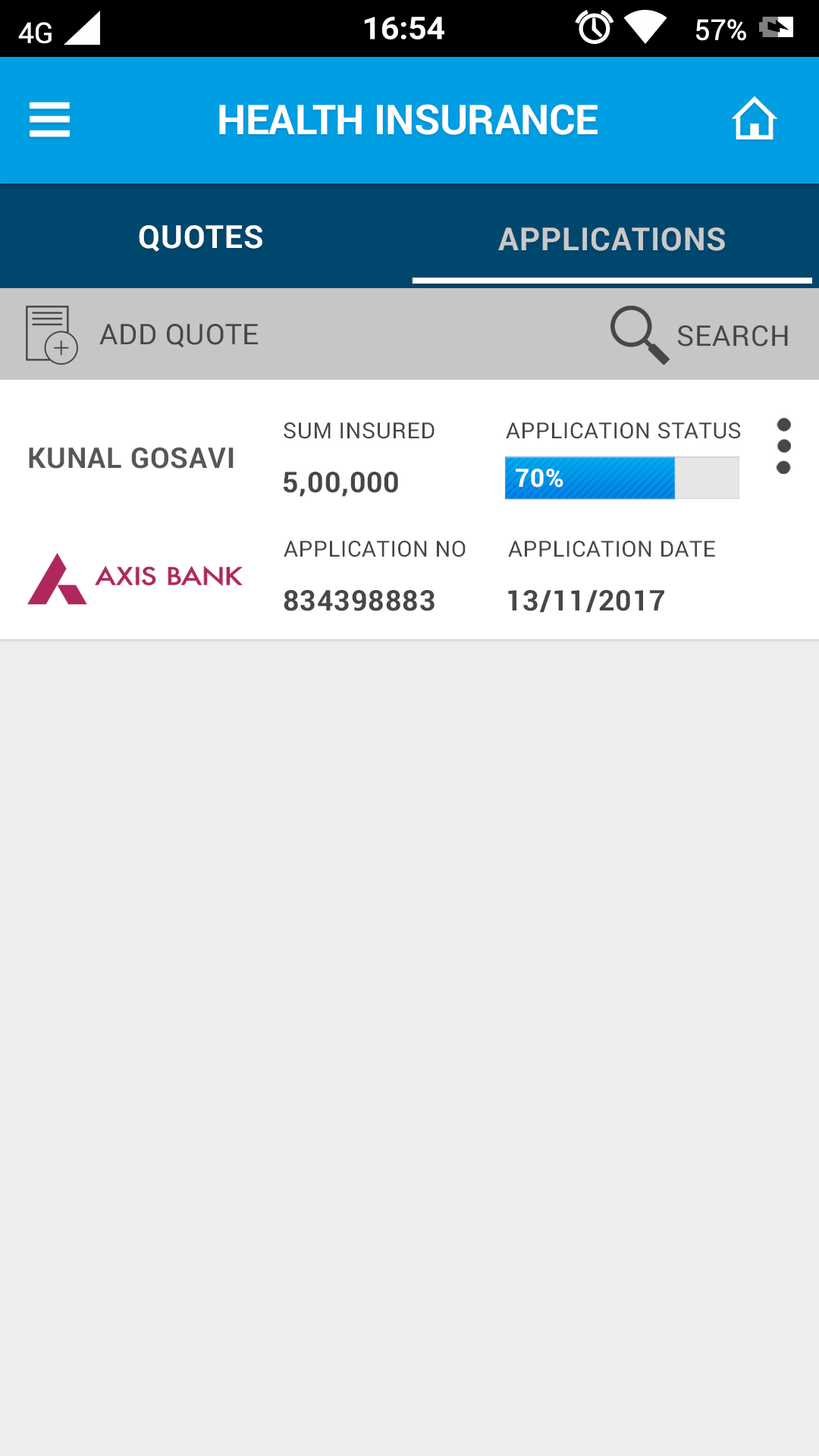
<style>
.page{position:relative;width:819px;height:1456px;background:#eeeeee}
.page>*{position:absolute;margin:0}
.t1{font:41.1px "Roboto-Bold";letter-spacing:-0.01em;color:#ffffff}
.t2{font:31.6px "Roboto-Bold";letter-spacing:0.025em;color:#ffffff}
.t3{font:31.6px "Roboto-Bold";letter-spacing:0.025em;color:#c9c9c9}
.t4{font:28.4px "Roboto-Regular";letter-spacing:0.025em;color:#474747}
.t5{font:22.1px "Roboto-Regular";letter-spacing:0.025em;color:#474747}
.t6{font:28.4px "Roboto-Bold";letter-spacing:0.025em;color:#575757}
.t7{font:28.4px "Roboto-Bold";letter-spacing:0.025em;color:#474747}
.t8{font:25.3px "Roboto-Bold";letter-spacing:0.025em;color:#ffffff}
</style>
<div class="page">
<p class="t1" style="left:219px;top:104px;width:379px;height:31px">HEALTH INSURANCE</p>
<p class="t2" style="left:139px;top:225px;width:123px;height:27px">QUOTES</p>
<p class="t3" style="left:498px;top:227px;width:227px;height:24px">APPLICATIONS</p>
<p class="t4" style="left:99px;top:324px;width:159px;height:24px">ADD QUOTE</p>
<p class="t4" style="left:677px;top:325px;width:111px;height:22px">SEARCH</p>
<p class="t5" style="left:284px;top:422px;width:151px;height:17px">SUM INSURED</p>
<p class="t5" style="left:506px;top:422px;width:235px;height:17px">APPLICATION STATUS</p>
<p class="t6" style="left:29px;top:447px;width:205px;height:22px">KUNAL GOSAVI</p>
<p class="t7" style="left:284px;top:472px;width:114px;height:25px">5,00,000</p>
<p class="t8" style="left:516px;top:469px;width:47px;height:19px">70%</p>
<p class="t5" style="left:284px;top:541px;width:182px;height:16px">APPLICATION NO</p>
<p class="t5" style="left:508px;top:541px;width:207px;height:16px">APPLICATION DATE</p>
<p class="t7" style="left:284px;top:590px;width:151px;height:21px">834398883</p>
<p class="t7" style="left:508px;top:590px;width:156px;height:23px">13/11/2017</p>
</div>
